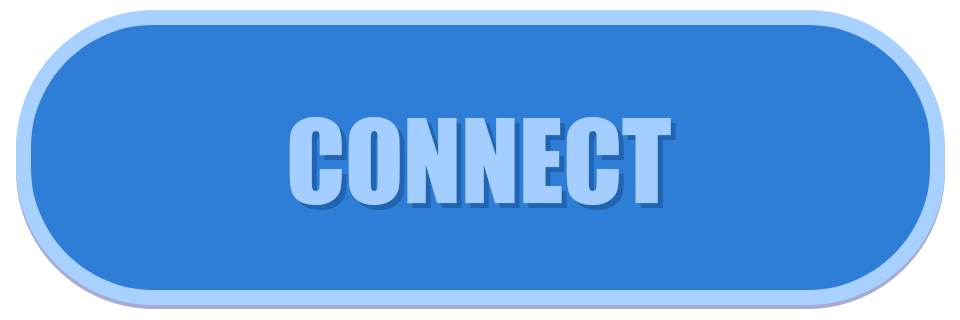
<style>
.page{position:relative;width:960px;height:320px;background:#2e7dd6}
.page>*{position:absolute;margin:0}
.t1{font:106.7px "Impact";color:#a3ceff}
</style>
<div class="page">
<p class="t1" style="left:289px;top:117px;width:382px;height:88px">CONNECT</p>
</div>
